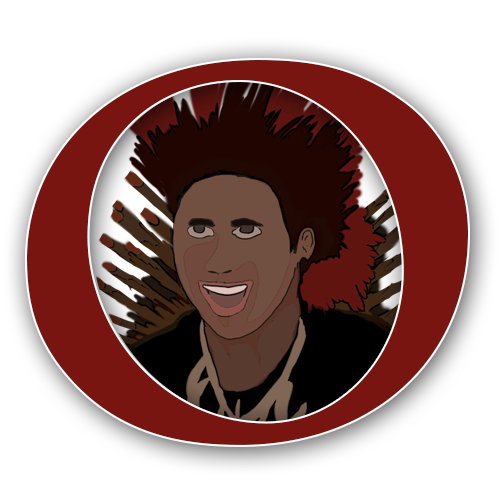
<style>
.page{position:relative;width:502px;height:502px;background:#ffffff}
.page>*{position:absolute;margin:0}
.t1{font:527px "CharlemagneStd-Bold";color:#791510}
</style>
<div class="page">
<p class="t1" style="left:27px;top:60px;width:441px;height:385px">o</p>
</div>
